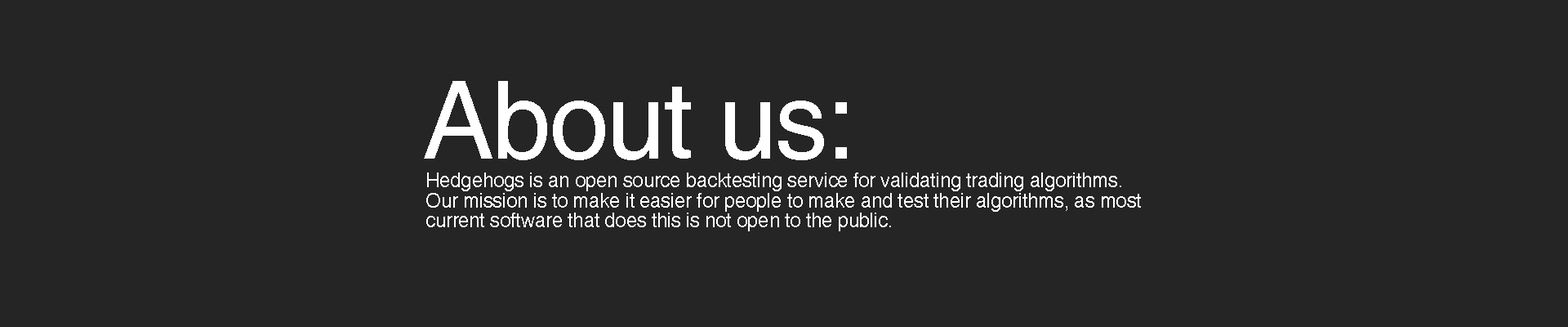
<style>
.page{position:relative;width:1568px;height:327px;background:#252525}
.page>*{position:absolute;margin:0}
.t1{font:108.9px "Helvetica";letter-spacing:-0.02em;color:#ffffff}
.t2{font:20.4px/20px "Helvetica";letter-spacing:-0.02em;color:#ffffff}
</style>
<div class="page">
<p class="t1" style="left:424px;top:81px;width:423px;height:79px">About us:</p>
<p class="t2" style="left:426px;top:172px;width:715px;height:59px">Hedgehogs is an open source backtesting service for validating trading algorithms. <br>Our mission is to make it easier for people to make and test their algorithms, as most <br>current software that does this is not open to the public.</p>
</div>
